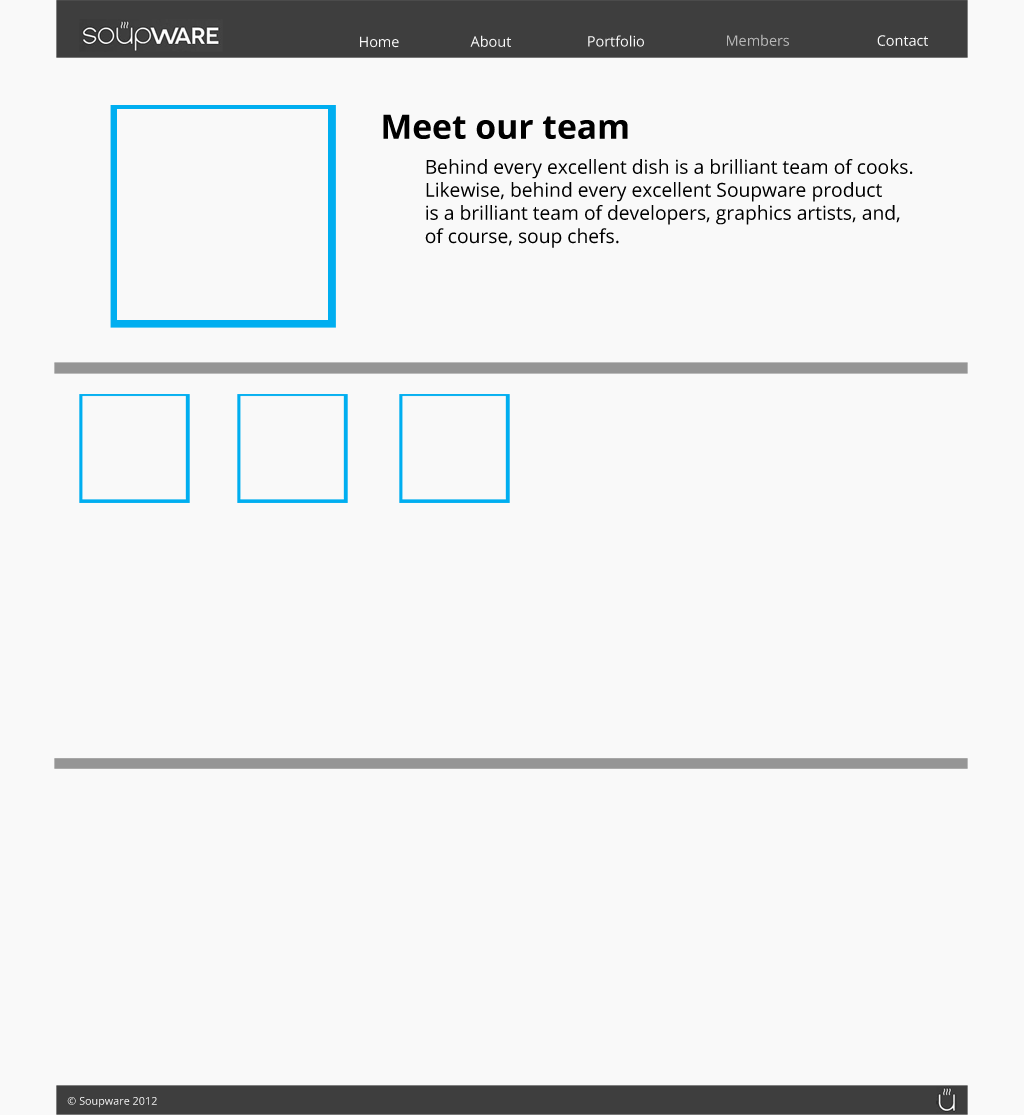
<style>
.page{position:relative;width:1024px;height:1115px;background:#f9f9f9}
.page>*{position:absolute;margin:0}
.t1{font:14.4px "OpenSans";color:#f9f9f9}
.t2{font:14.4px "OpenSans";color:#b7b7b7}
.t3{font:33.7px "OpenSans-Bold";color:#000000}
.t4{font:19.2px "OpenSans";color:#000000}
.t5{font:10.8px "OpenSans";color:#f9f9f9}
</style>
<div class="page">
<p class="t1" style="left:360px;top:36px;width:39px;height:12px">Home</p>
<p class="t1" style="left:470px;top:35px;width:41px;height:12px">About</p>
<p class="t1" style="left:588px;top:35px;width:56px;height:12px">Portfolio</p>
<p class="t2" style="left:727px;top:34px;width:62px;height:12px">Members</p>
<p class="t1" style="left:877px;top:35px;width:51px;height:11px">Contact</p>
<p class="t3" style="left:383px;top:114px;width:245px;height:25px">Meet our team</p>
<p class="t4" style="left:425px;top:159px;width:488px;height:89px">Behind every excellent dish is a brilliant team of cooks.<br>Likewise, behind every excellent Soupware product<br>is a brilliant team of developers, graphics artists, and,<br>of course, soup chefs.</p>
<p class="t5" style="left:67px;top:1097px;width:90px;height:11px">© Soupware 2012</p>
</div>
